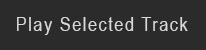
<style>
.page{position:relative;width:206px;height:50px;background:#2b2b2b}
.page>*{position:absolute;margin:0}
.t1{font:20px "ArialNarrow";letter-spacing:0.075em;color:#d9d9d8}
</style>
<div class="page">
<p class="t1" style="left:17px;top:17px;width:171px;height:18px">Play Selected Track</p>
</div>
